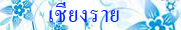
<style>
.page{position:relative;width:181px;height:30px}
.page>*{position:absolute;margin:0}
.t1{font:30px "AngsanaUPC";letter-spacing:0.025em;color:#0824f9}
</style>
<div class="page">
<p class="t1" style="left:49px;top:2px;width:70px;height:20px">เชียงราย</p>
</div>
